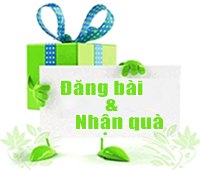
<style>
.page{position:relative;width:200px;height:170px;background:#ffffff}
.page>*{position:absolute;margin:0}
.t1{font:17.9px "Impact";letter-spacing:0.025em;color:#70e118;scale:1.24 1}
</style>
<div class="page">
<p class="t1" style="left:60px;top:79px;width:83px;height:18px">Đăng bài</p>
<p class="t1" style="left:105px;top:99px;width:13px;height:13px">&amp;</p>
<p class="t1" style="left:76px;top:114px;width:87px;height:17px">Nhân quà</p>
<p class="t1" style="left:103px;top:132px;width:4px;height:3px">.</p>
</div>
